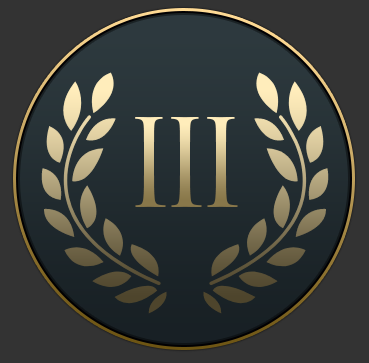
<style>
.page{position:relative;width:369px;height:363px;background:#333333}
.page>*{position:absolute;margin:0}
.t1{font:120px "TrajanPro-Regular";letter-spacing:-0.14em}
</style>
<div class="page">
<p class="t1" style="left:135px;top:116px;width:103px;height:91px">III</p>
</div>
